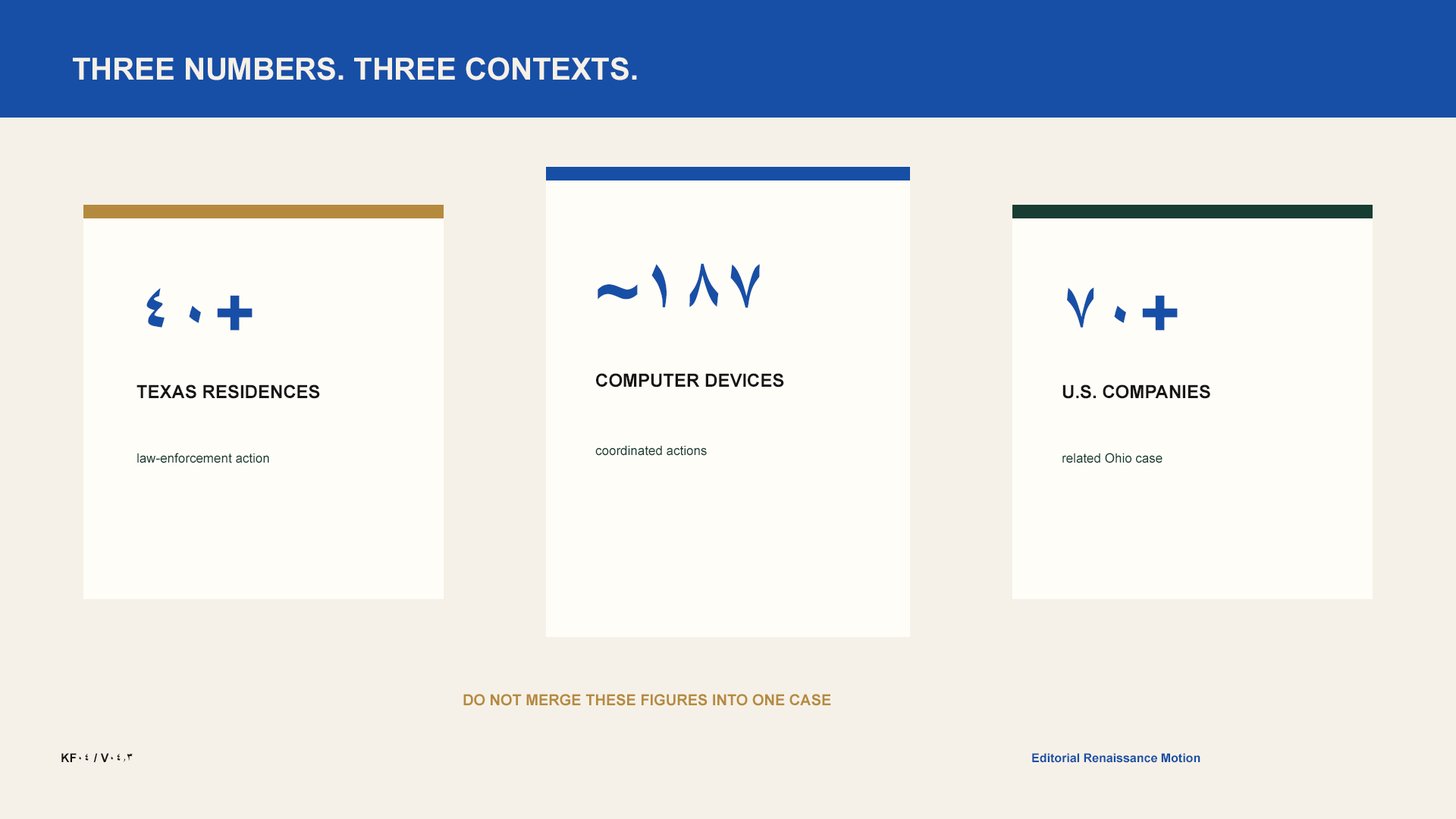
<style>
.page{position:relative;width:1456px;height:819px;background:#f6f1e8}
.page>*{position:absolute;margin:0}
.t1{font:30.3px "Arial-BoldMT";color:#f6f1e8}
.t2{font:75.8px "Arial-BoldMT";color:#174fa6}
.t3{font:69.8px "Arial-BoldMT";color:#174fa6}
.t4{font:18.2px "Arial-BoldMT";color:#151515}
.t5{font:12.9px "ArialMT";color:#173c32}
.t6{font:15.2px "Arial-BoldMT";color:#b58a3e}
.t7{font:12.1px "Arial-BoldMT";color:#151515}
.t8{font:12.1px "Arial-BoldMT";color:#174fa6}
</style>
<div class="page">
<p class="t1" style="left:73px;top:57px;width:564px;height:23px">THREE NUMBERS. THREE CONTEXTS.</p>
<p class="t2" style="left:598px;top:263px;width:162px;height:45px">~187</p>
<p class="t3" style="left:146px;top:287px;width:107px;height:44px">40+</p>
<p class="t3" style="left:1067px;top:287px;width:111px;height:44px">70+</p>
<p class="t4" style="left:596px;top:373px;width:188px;height:15px">COMPUTER DEVICES</p>
<p class="t4" style="left:136px;top:384px;width:184px;height:15px">TEXAS RESIDENCES</p>
<p class="t4" style="left:1062px;top:384px;width:148px;height:15px">U.S. COMPANIES</p>
<p class="t5" style="left:595px;top:445px;width:112px;height:11px">coordinated actions</p>
<p class="t5" style="left:137px;top:453px;width:132px;height:10px">law-enforcement action</p>
<p class="t5" style="left:1062px;top:453px;width:101px;height:10px">related Ohio case</p>
<p class="t6" style="left:463px;top:694px;width:368px;height:12px">DO NOT MERGE THESE FIGURES INTO ONE CASE</p>
<p class="t7" style="left:61px;top:753px;width:72px;height:9px">KF04 / V04.3</p>
<p class="t8" style="left:1032px;top:753px;width:168px;height:10px">Editorial Renaissance Motion</p>
</div>
